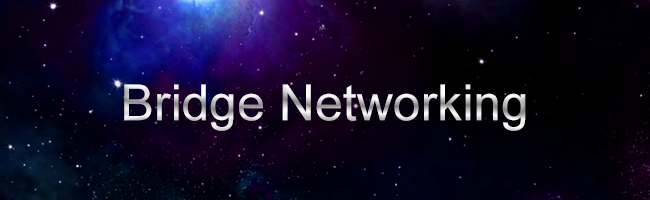
<style>
.page{position:relative;width:650px;height:200px}
.page>*{position:absolute;margin:0}
.t1{font:50px "ArialMT"}
</style>
<div class="page">
<p class="t1" style="left:124px;top:84px;width:402px;height:47px">Bridge Networking</p>
</div>
